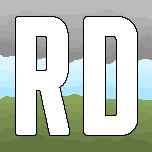
<style>
.page{position:relative;width:152px;height:152px;background:#ffffff}
.page>*{position:absolute;margin:0}
.t1{font:158.3px "BigNoodleTitling";letter-spacing:0.03em;color:#ffffff;font-weight:bold}
</style>
<div class="page">
<p class="t1" style="left:16px;top:17px;width:121px;height:118px">RD</p>
</div>
